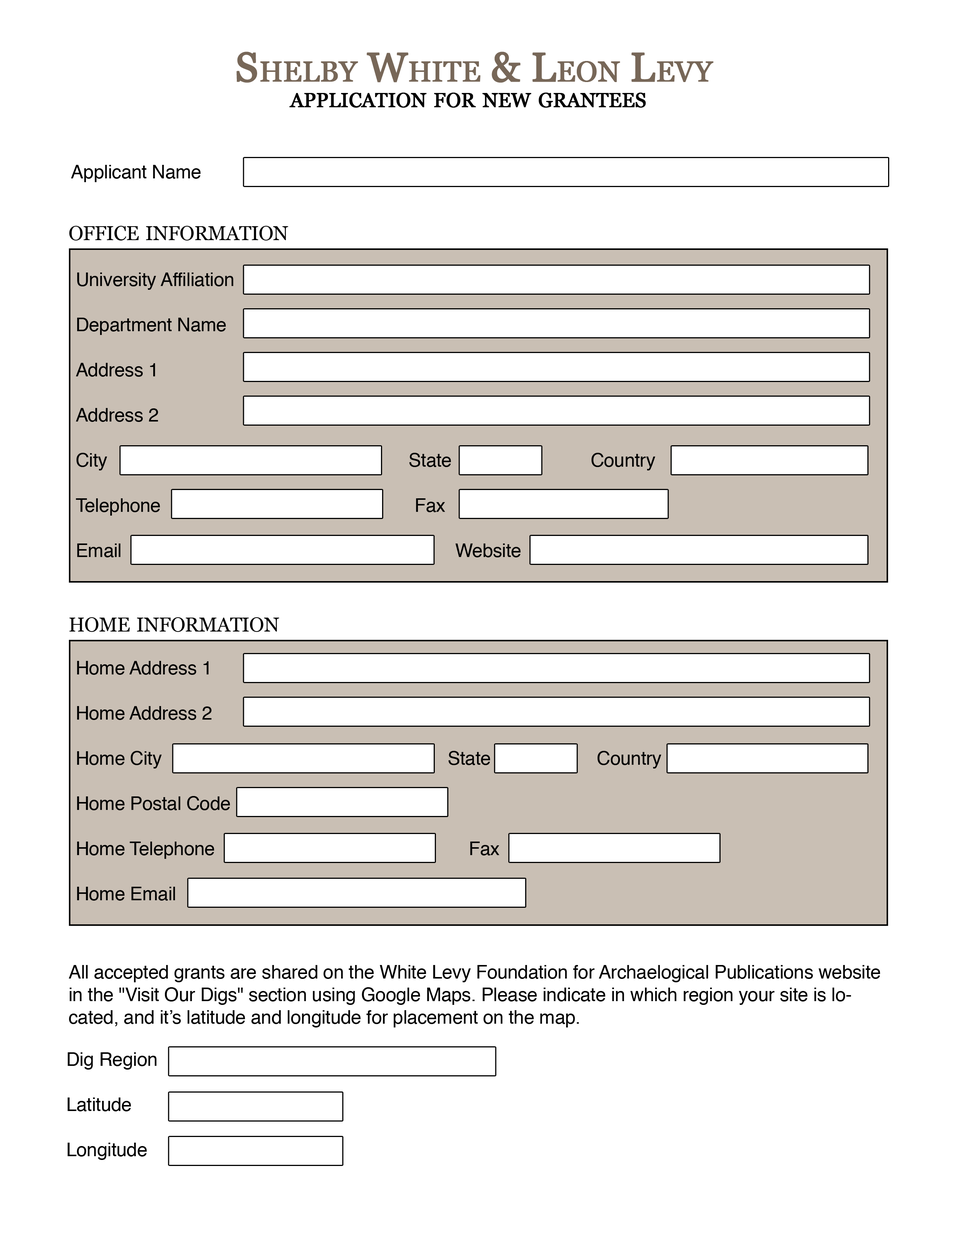
<style>
.page{position:relative;width:960px;height:1242px;background:#ffffff}
.page>*{position:absolute;margin:0}
.t1{font:40.8px "Georgia";letter-spacing:-0.01em;color:#776758;font-variant:small-caps;font-weight:bold}
.t2{font:28.2px "Georgia";letter-spacing:-0.01em;color:#000000;font-variant:small-caps;font-weight:bold}
.t3{font:18.8px "Helvetica";letter-spacing:-0.01em;color:#000000}
.t4{font:28.2px "Georgia";letter-spacing:-0.01em;color:#000000;font-variant:small-caps}
</style>
<div class="page">
<p class="t1" style="left:236px;top:52px;width:477px;height:31px">Shelby White &amp; Leon Levy</p>
<p class="t2" style="left:289px;top:93px;width:357px;height:15px">application for new grantees</p>
<p class="t3" style="left:71px;top:165px;width:130px;height:17px">Applicant Name</p>
<p class="t4" style="left:69px;top:226px;width:219px;height:15px">office information</p>
<p class="t3" style="left:76px;top:273px;width:579px;height:285px">University Affiliation<br><br>Department Name<br><br>Address 1<br><br>Address 2<br><br>City                                 State                      Country<br><br>Telephone                              Fax               <br><br>Email                          Website</p>
<p class="t4" style="left:69px;top:617px;width:210px;height:15px">home information</p>
<p class="t3" style="left:77px;top:661px;width:584px;height:240px">Home Address 1<br><br>Home Address 2<br><br>Home City                              State                Country<br><br>Home Postal Code<br><br>Home Telephone                              Fax               <br><br>Home Email</p>
<p class="t3" style="left:69px;top:965px;width:811px;height:63px">All accepted grants are shared on the White Levy Foundation for Archaelogical Publications website in the "Visit Our Digs" section using Google Maps. Please indicate in which region your site is located, and it’s latitude and longitude for placement on the map.</p>
<p class="t3" style="left:67px;top:1053px;width:90px;height:107px">Dig Region<br><br>Latitude<br><br>Longitude</p>
</div>
